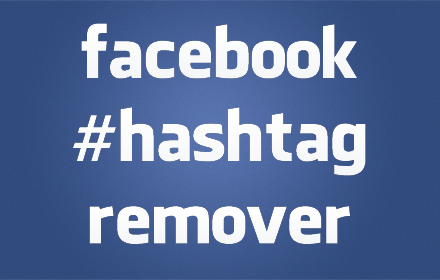
<style>
.page{position:relative;width:440px;height:280px}
.page>*{position:absolute;margin:0}
.t1{font:69px "FacebookLetterFaces";color:#ffffff}
.t2{font:69.2px "FacebookLetterFaces";color:#ffffff}
.t3{font:69.2px "Ronnia-Regular";color:#ffffff}
</style>
<div class="page">
<p class="t1" style="left:81px;top:23px;width:276px;height:56px">facebook</p>
<p class="t2" style="left:73px;top:107px;width:293px;height:69px"><span class="t3">#</span>hashtag</p>
<p class="t1" style="left:89px;top:206px;width:261px;height:38px">remover</p>
</div>
